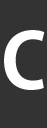
<style>
.page{position:relative;width:47px;height:128px;background:#333333}
.page>*{position:absolute;margin:0}
.t1{font:75px "AdobeGothicStd-Bold";color:#ffffff}
</style>
<div class="page">
<p class="t1" style="left:4px;top:30px;width:41px;height:60px">C</p>
</div>
